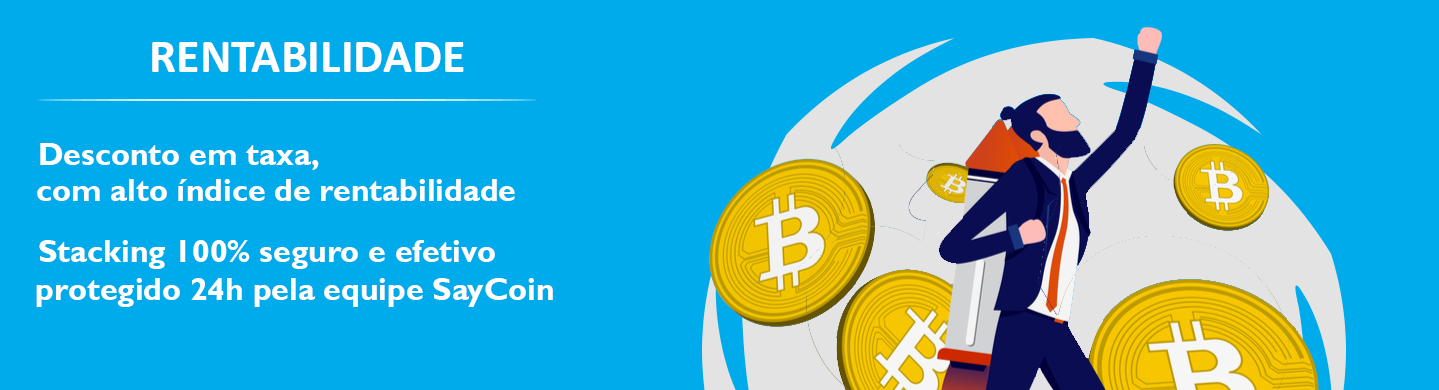
<style>
.page{position:relative;width:1439px;height:390px;background:#00abeb}
.page>*{position:absolute;margin:0}
.t1{font:48px "Calibri-Bold";color:#ffffff}
.t2{font:32px "GillSansMT-Bold";color:#ffffff}
</style>
<div class="page">
<p class="t1" style="left:152px;top:42px;width:312px;height:30px">RENTABILIDADE</p>
<p class="t2" style="left:40px;top:143px;width:279px;height:27px">Desconto em taxa,</p>
<p class="t2" style="left:37px;top:179px;width:478px;height:22px">com alto índice de rentabilidade</p>
<p class="t2" style="left:39px;top:240px;width:456px;height:29px">Stacking 100% seguro e efetivo</p>
<p class="t2" style="left:36px;top:278px;width:517px;height:29px">protegido 24h pela equipe SayCoin</p>
</div>
